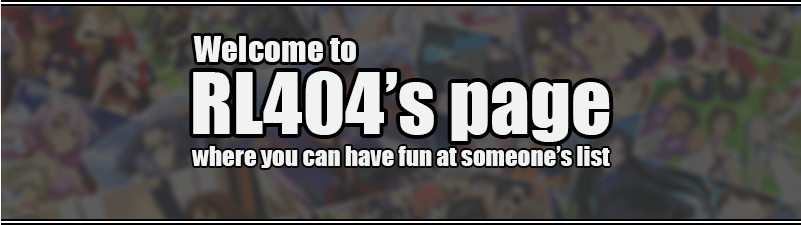
<style>
.page{position:relative;width:801px;height:225px}
.page>*{position:absolute;margin:0}
.t1{font:33.4px "Impact";color:#f2f2f2}
.t2{font:79.3px "Impact";color:#f2f2f2}
.t3{font:25px "Impact";color:#f2f2f2}
</style>
<div class="page">
<p class="t1" style="left:193px;top:36px;width:163px;height:26px">Welcome to</p>
<p class="t2" style="left:193px;top:71px;width:417px;height:71px">RL404’s page</p>
<p class="t3" style="left:192px;top:146px;width:418px;height:22px">where you can have fun at someone’s list</p>
</div>
